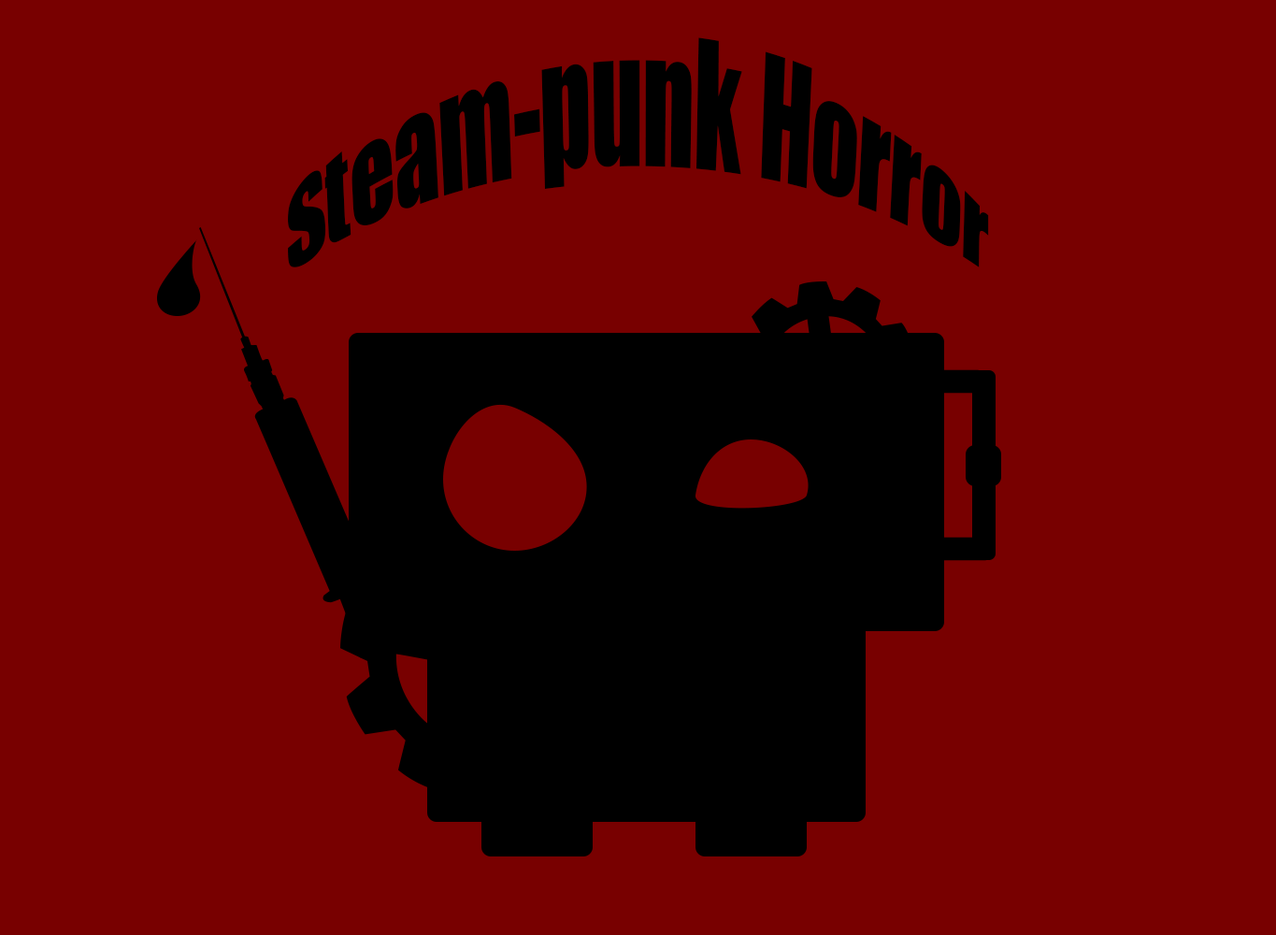
<style>
.page{position:relative;width:1276px;height:935px;background:#780000}
.page>*{position:absolute;margin:0}
.t1{font:21.7px "Impact";color:#000000}
</style>
<div class="page">
<p class="t1" style="left:288px;top:37px;width:701px;height:230px">Steam-punk Horror</p>
</div>
